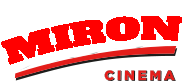
<style>
.page{position:relative;width:182px;height:81px;background:#ffffff}
.page>*{position:absolute;margin:0}
.t1{font:30px "AlfaSlabOne-Regular";color:#ff0000;scale:1.12 1}
</style>
<div class="page">
<p class="t1" style="left:1px;top:16px;width:182px;height:49px;rotate:-8deg">MIRON</p>
</div>
